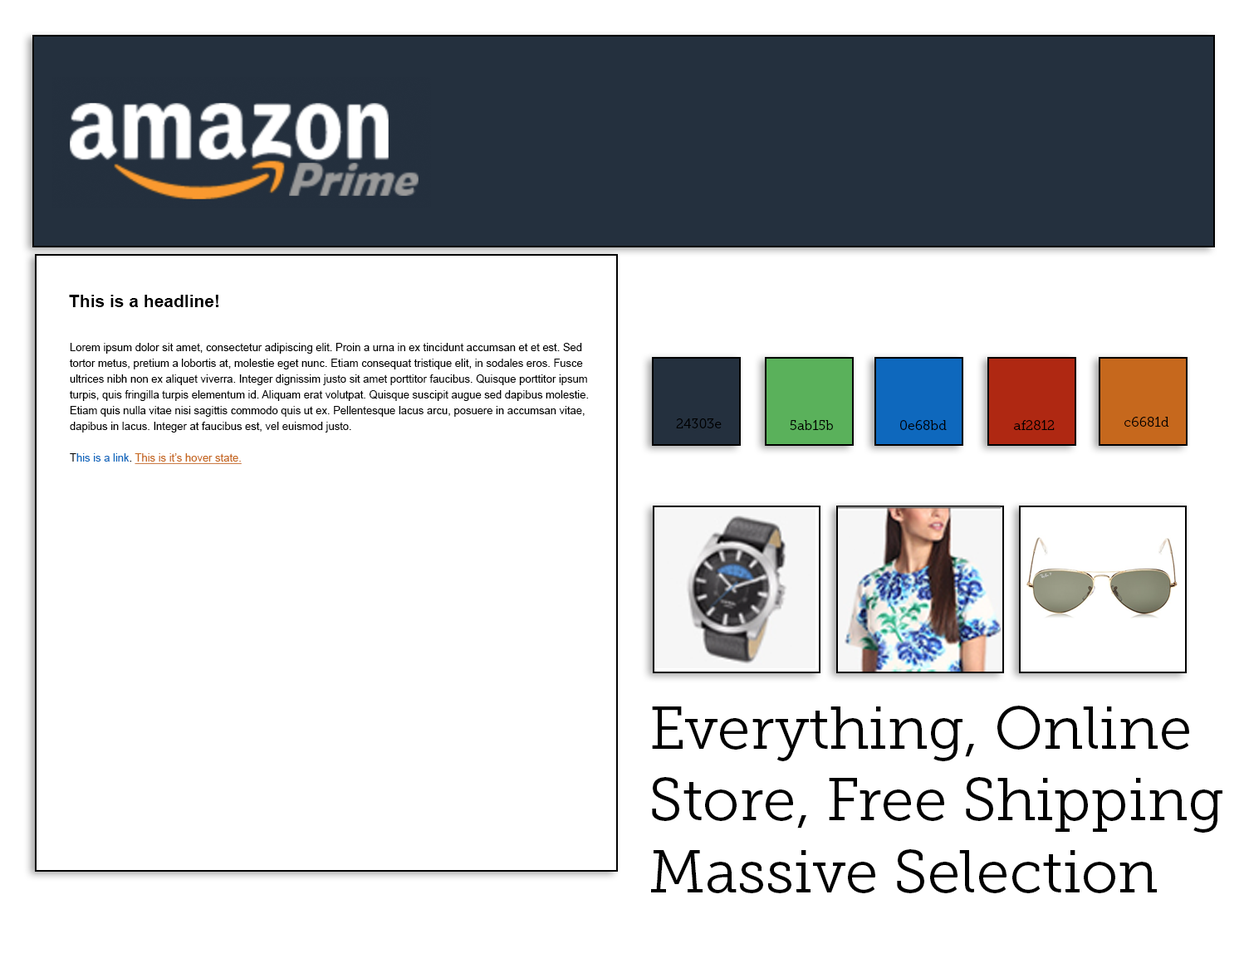
<style>
.page{position:relative;width:1244px;height:958px;background:#ffffff}
.page>*{position:absolute;margin:0}
.t1{font:17.4px "Arial-BoldMT";color:#000000}
.t2{font:10.8px/15.8px "ArialMT";color:#000000}
.t3{font:10.8px/15.8px "ArialMT";color:#0e68bd}
.t4{font:10.8px/15.8px "ArialMT";color:#c6681d;text-decoration:underline}
.t5{font:13.3px "MuseoSlab-300";color:#000000}
.t6{font:59.8px "MuseoSlab-300";color:#000000}
</style>
<div class="page">
<p class="t1" style="left:69px;top:295px;width:149px;height:12px">This is a headline!</p>
<p class="t2" style="left:70px;top:343px;width:519px;height:121px">Lorem ipsum dolor sit amet, consectetur adipiscing elit. Proin a urna in ex tincidunt accumsan et et est. Sed tortor metus, pretium a lobortis at, molestie eget nunc. Etiam consequat tristique elit, in sodales eros. Fusce ultrices nibh non ex aliquet viverra. Integer dignissim justo sit amet porttitor faucibus. Quisque porttitor ipsum turpis, quis fringilla turpis elementum id. Aliquam erat volutpat. Quisque suscipit augue sed dapibus molestie. Etiam quis nulla vitae nisi sagittis commodo quis ut ex. Pellentesque lacus arcu, posuere in accumsan vitae, dapibus in lacus. Integer at faucibus est, vel euismod justo.<br><br>T<span class="t3">his is a link</span>. <span class="t4">This is it’s hover state.</span></p>
<p class="t5" style="left:676px;top:419px;width:46px;height:10px">24303e</p>
<p class="t5" style="left:790px;top:420px;width:43px;height:10px">5ab15b</p>
<p class="t5" style="left:900px;top:420px;width:47px;height:10px">0e68bd</p>
<p class="t5" style="left:1014px;top:420px;width:41px;height:10px">af2812</p>
<p class="t5" style="left:1125px;top:417px;width:44px;height:10px">c6681d</p>
<p class="t6" style="left:651px;top:706px;width:572px;height:188px">Everything, Online<br>Store, Free Shipping<br>Massive Selection</p>
</div>
